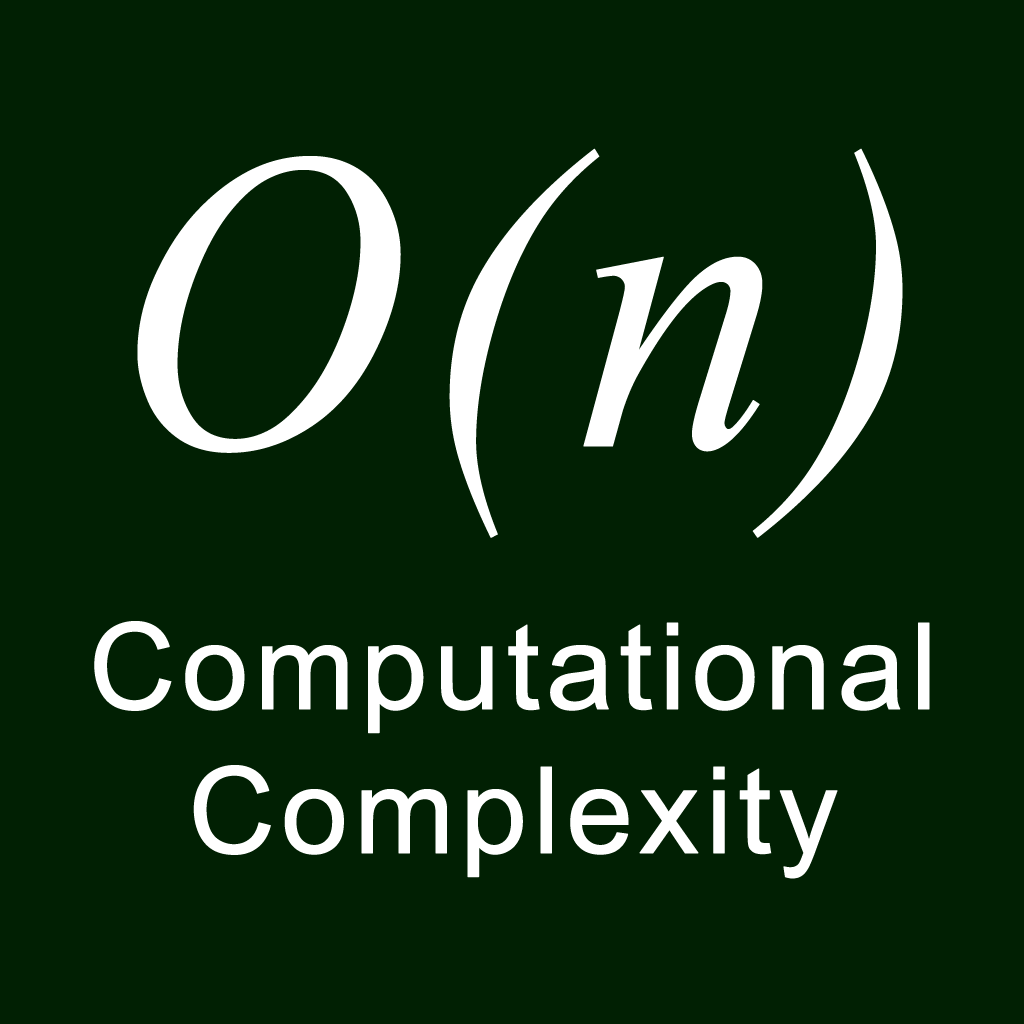
<style>
.page{position:relative;width:1024px;height:1024px;background:#012003}
.page>*{position:absolute;margin:0}
.t1{font:427.8px "TimesNewRomanPS-ItalicMT";letter-spacing:0.025em;color:#ffffff;font-weight:bold;scale:0.93 1}
.t2{font:120px "ArialMT";letter-spacing:0.025em;color:#ffffff;font-weight:bold}
</style>
<div class="page">
<p class="t1" style="left:137px;top:148px;width:766px;height:390px">O(n)</p>
<p class="t2" style="left:94px;top:621px;width:836px;height:258px;text-align:center">Computational<br>Complexity</p>
</div>
